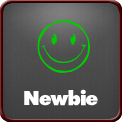
<style>
.page{position:relative;width:122px;height:122px}
.page>*{position:absolute;margin:0}
.t1{font:20px "IntrepidExtraBold";letter-spacing:-0.02em;color:#ffffff}
</style>
<div class="page">
<p class="t1" style="left:24px;top:89px;width:74px;height:17px">Newbie</p>
</div>
